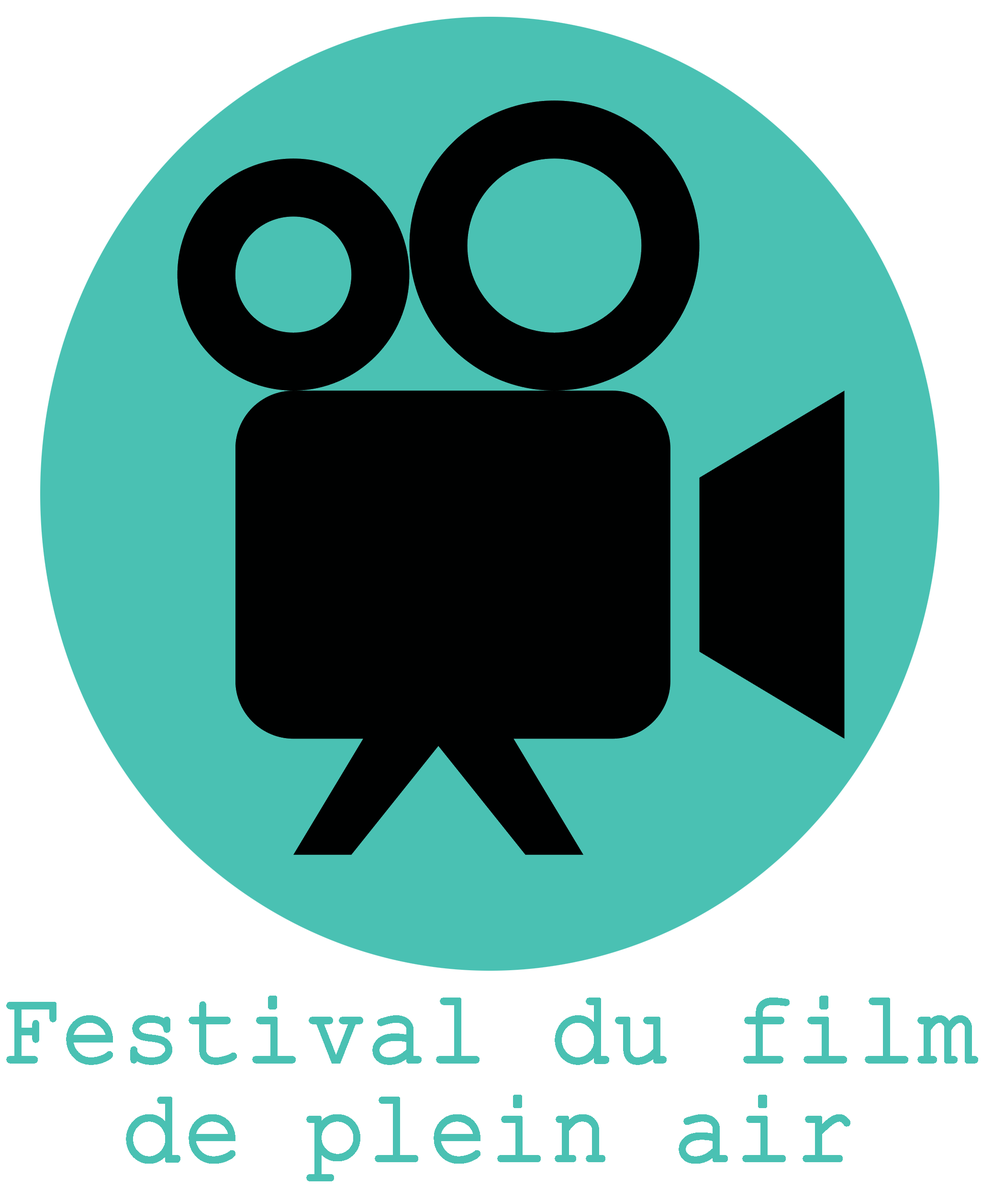
<style>
.page{position:relative;width:993px;height:1200px;background:#ffffff}
.page>*{position:absolute;margin:0}
.t1{font:102.6px/98.9px "CourierNewPSMT";color:#4ac1b3;font-weight:bold;scale:0.95 1}
</style>
<div class="page">
<p class="t1" style="left:6px;top:996px;width:973px;height:186px;text-align:center">Festival du film de plein air</p>
</div>
